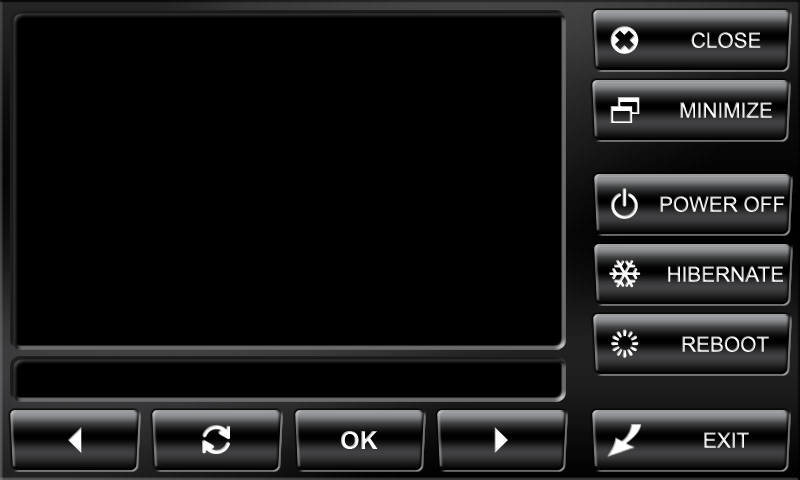
<style>
.page{position:relative;width:800px;height:480px;background:#000000}
.page>*{position:absolute;margin:0}
.t1{font:20.8px "ArialMT"}
</style>
<div class="page">
<p class="t1" style="left:691px;top:32px;width:70px;height:16px">CLOSE</p>
<p class="t1" style="left:680px;top:102px;width:92px;height:16px">MINIMIZE</p>
<p class="t1" style="left:660px;top:196px;width:125px;height:16px">POWER OFF</p>
<p class="t1" style="left:668px;top:266px;width:115px;height:16px">HIBERNATE</p>
<p class="t1" style="left:682px;top:336px;width:87px;height:16px">REBOOT</p>
<p class="t1" style="left:704px;top:432px;width:45px;height:16px">EXIT</p>
</div>
